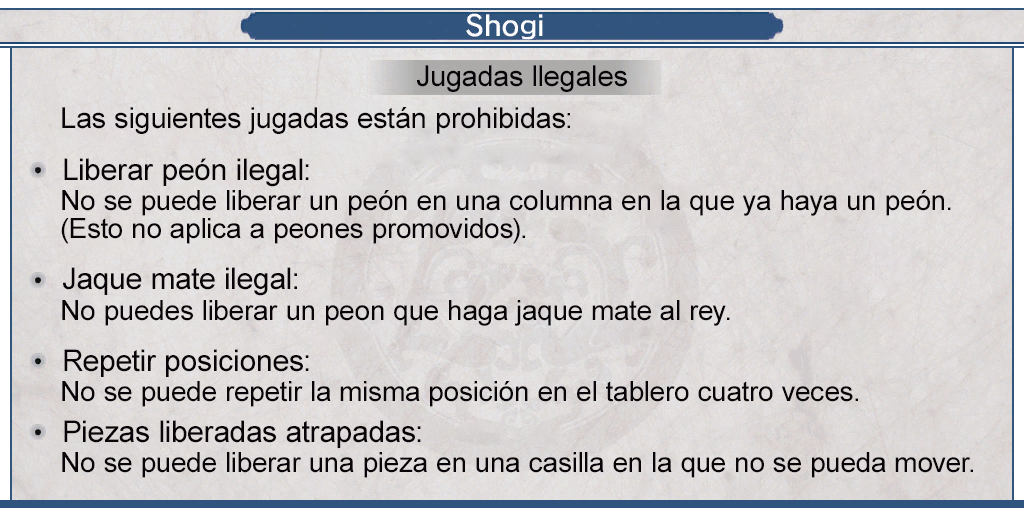
<style>
.page{position:relative;width:1024px;height:512px}
.page>*{position:absolute;margin:0}
.t1{font:29px "ArialMT";color:#080408}
.t2{font:30px "ArialMT";color:#080408}
.t3{font:28px/28px "ArialMT";color:#080408}
.t4{font:28px "ArialMT";color:#080408}
</style>
<div class="page">
<p class="t1" style="left:417px;top:65px;width:210px;height:27px">Jugadas llegales</p>
<p class="t1" style="left:62px;top:107px;width:508px;height:27px">Las siguientes jugadas están prohibidas:</p>
<p class="t2" style="left:64px;top:158px;width:245px;height:29px">Liberar peón ilegal:</p>
<p class="t3" style="left:61px;top:190px;width:890px;height:54px">No se puede liberar un peón en una columna en la que ya haya un peón.<br>(Esto no aplica a peones promovidos).</p>
<p class="t2" style="left:63px;top:267px;width:234px;height:29px">Jaque mate ilegal:</p>
<p class="t4" style="left:62px;top:300px;width:668px;height:26px">No puedes liberar un peon que haga jaque mate al rey.</p>
<p class="t2" style="left:64px;top:349px;width:245px;height:28px">Repetir posiciones:</p>
<p class="t4" style="left:62px;top:381px;width:796px;height:26px">No se puede repetir la misma posición en el tablero cuatro veces.</p>
<p class="t2" style="left:64px;top:420px;width:357px;height:28px">Piezas liberadas atrapadas:</p>
<p class="t4" style="left:62px;top:452px;width:911px;height:26px">No se puede liberar una pieza en una casilla en la que no se pueda mover.</p>
</div>
